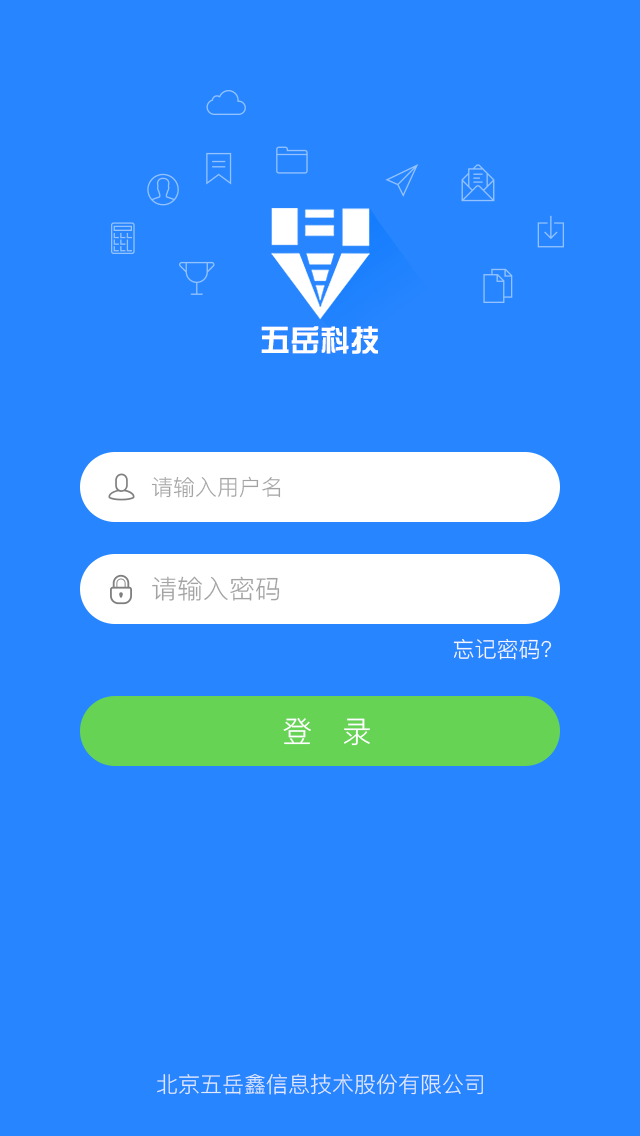
<style>
.page{position:relative;width:640px;height:1136px;background:#2785ff}
.page>*{position:absolute;margin:0}
.t1{font:30px "HYk1gj";color:#ffffff}
.t2{font:22px "PingFang-SC-Regular";color:#a3a3a3}
.t3{font:26px "PingFang-SC-Regular";color:#a3a3a3}
.t4{font:22px "PingFang-SC-Regular";color:#ffffff}
.t5{font:30px "PingFang-SC-Regular";color:#ffffff}
.t6{font:22px "PingFang-SC-Regular";color:#dfeaff}
</style>
<div class="page">
<p class="t1" style="left:261px;top:326px;width:117px;height:28px">五岳科技</p>
<p class="t2" style="left:151px;top:476px;width:130px;height:22px">请输入用户名</p>
<p class="t3" style="left:152px;top:576px;width:128px;height:25px">请输入密码</p>
<p class="t4" style="left:453px;top:639px;width:99px;height:21px;opacity:0.9">忘记密码?</p>
<p class="t5" style="left:283px;top:718px;width:87px;height:28px">登   录</p>
<p class="t6" style="left:157px;top:1073px;width:326px;height:22px">北京五岳鑫信息技术股份有限公司</p>
</div>
